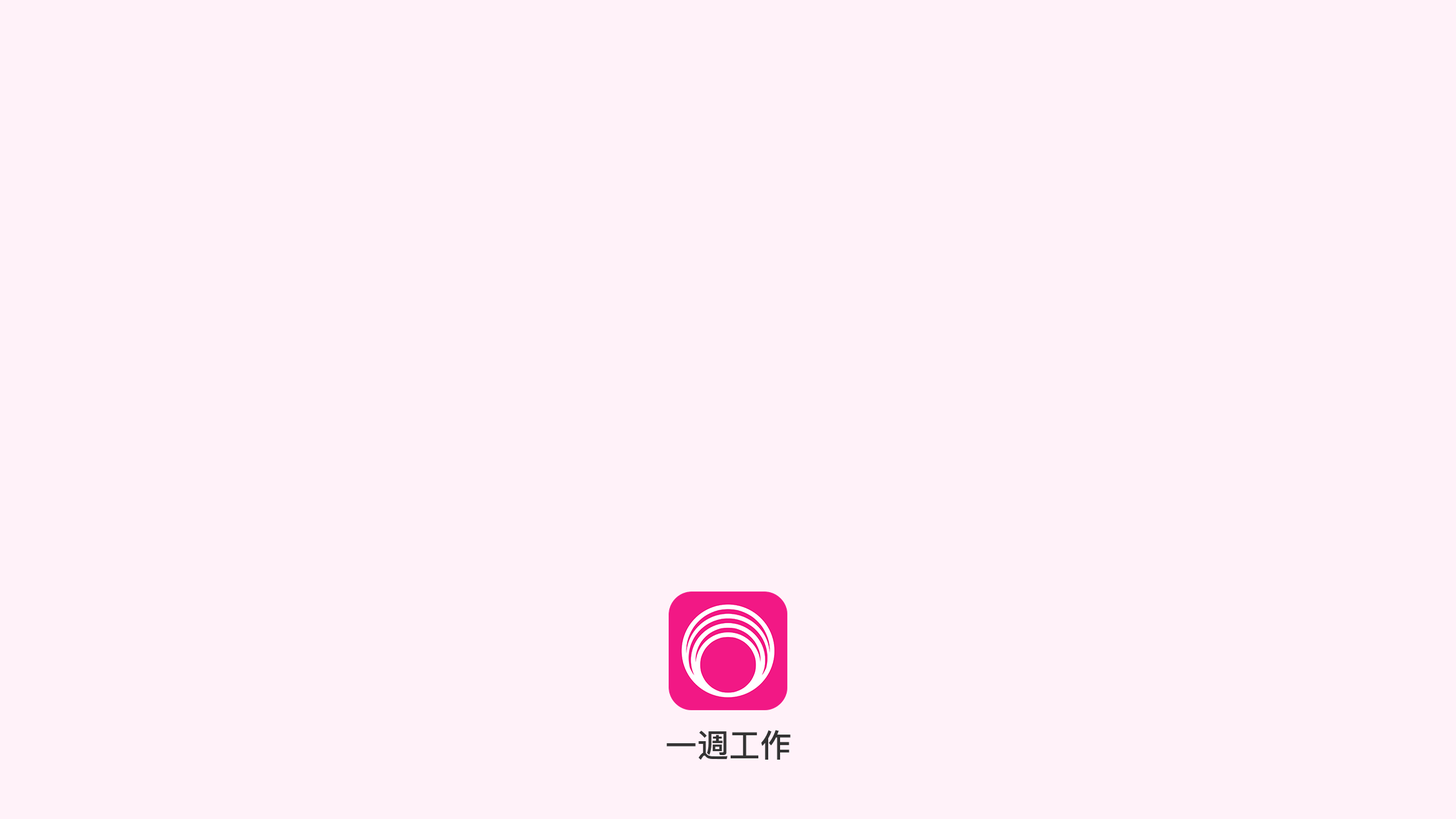
<style>
.page{position:relative;width:1456px;height:819px;background:#fff2f9}
.page>*{position:absolute;margin:0}
.t1{font:31.7px "PingFang-SC-Bold";color:#333333}
</style>
<div class="page">
<p class="t1" style="left:667px;top:730px;width:124px;height:30px">一週工作</p>
</div>
